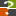
<style>
.page{position:relative;width:16px;height:16px;background:#444444}
.page>*{position:absolute;margin:0}
.t1{font:24px "Papyrus-Regular";color:#ffffff;font-weight:bold}
</style>
<div class="page">
<p class="t1" style="left:4px;top:1px;width:10px;height:14px;rotate:14deg">?</p>
</div>
